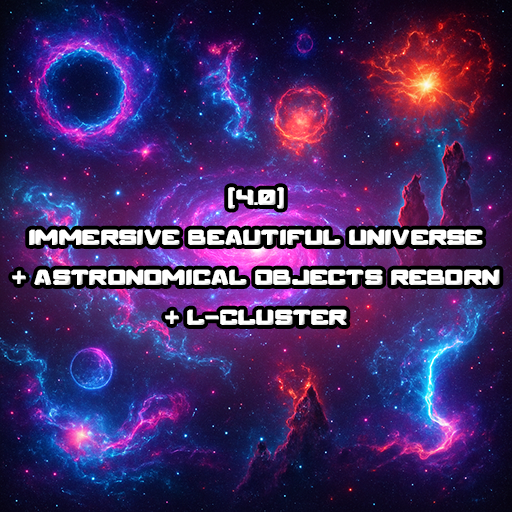
<style>
.page{position:relative;width:512px;height:512px}
.page>*{position:absolute;margin:0}
.t1{font:21px/40px "SPACENOVA";color:#ffffff}
</style>
<div class="page">
<p class="t1" style="left:12px;top:187px;width:488px;height:138px;text-align:center">[4.0]<br>Immersive Beautiful Universe<br>+ Astronomical Objects Reborn<br>+ L-Cluster</p>
</div>
